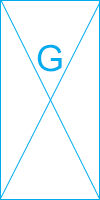
<style>
.page{position:relative;width:100px;height:200px;background:#ffffff}
.page>*{position:absolute;margin:0}
.t1{font:36px "ArialMT";color:#00aced}
</style>
<div class="page">
<p class="t1" style="left:37px;top:44px;width:25px;height:28px">G</p>
</div>
